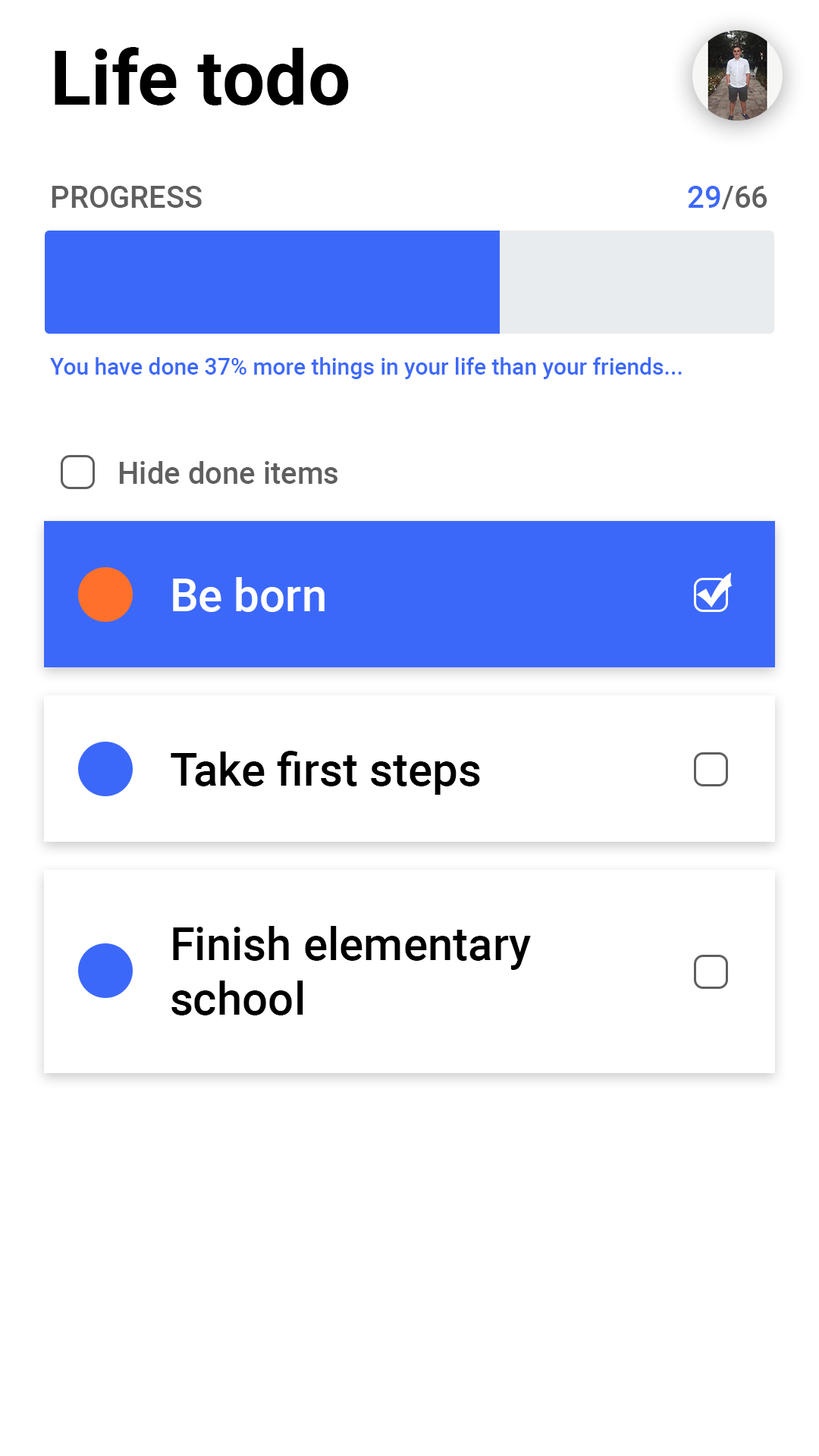
<style>
.page{position:relative;width:819px;height:1456px;background:#ffffff}
.page>*{position:absolute;margin:0}
.t1{font:75.8px "Roboto-Bold";color:#000000}
.t2{font:30.3px "Roboto-Medium";color:#5f5f5f}
.t3{font:30.3px "Roboto-Medium";color:#3c68fa}
.t4{font:22.7px "Roboto-Medium";color:#3c68fa}
.t5{font:45.5px "Roboto-Medium";color:#ffffff}
.t6{font:45.5px "Roboto-Medium";color:#000000}
</style>
<div class="page">
<p class="t1" style="left:55px;top:47px;width:294px;height:58px">Life todo</p>
<p class="t2" style="left:52px;top:186px;width:150px;height:22px">PROGRESS</p>
<p class="t2" style="left:688px;top:186px;width:79px;height:23px"><span class="t3">29</span>/66</p>
<p class="t4" style="left:50px;top:357px;width:632px;height:22px">You have done 37% more things in your life than your friends...</p>
<p class="t2" style="left:119px;top:461px;width:218px;height:23px">Hide done items</p>
<p class="t5" style="left:173px;top:577px;width:152px;height:35px">Be born</p>
<p class="t6" style="left:171px;top:751px;width:309px;height:44px">Take first steps</p>
<p class="t6" style="left:171px;top:926px;width:360px;height:89px">Finish elementary<br>school</p>
</div>
